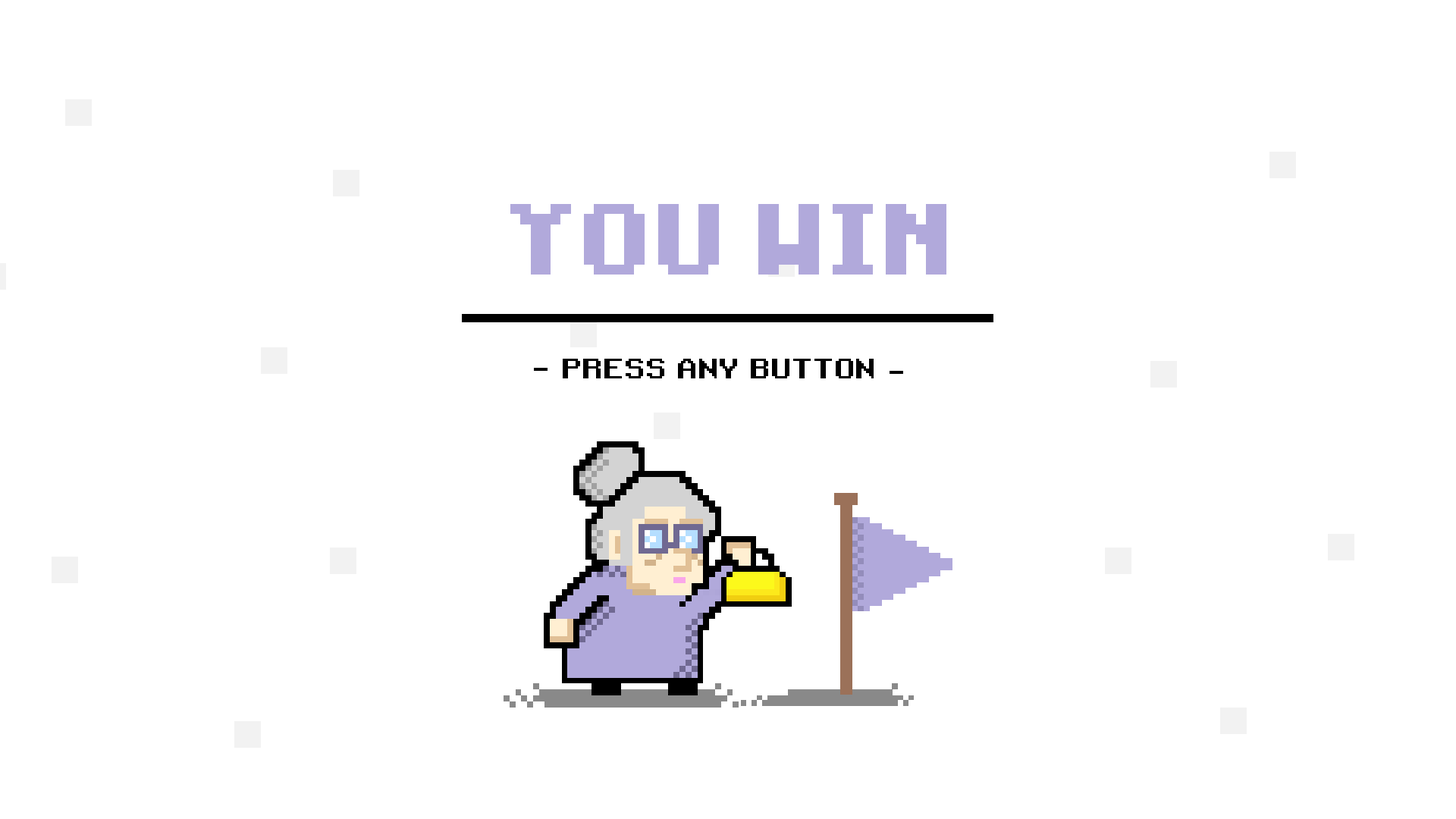
<style>
.page{position:relative;width:1456px;height:819px;background:#ffffff}
.page>*{position:absolute;margin:0}
.t1{font:80.5px "Mojang-Bold";letter-spacing:0.01em;color:#b1a9db}
.t2{font:27.3px "RetroGaming";color:#000000}
</style>
<div class="page">
<p class="t1" style="left:510px;top:204px;width:436px;height:71px">YOU  WIN</p>
<p class="t2" style="left:563px;top:359px;width:311px;height:19px">PRESS ANY BUTTON</p>
</div>
